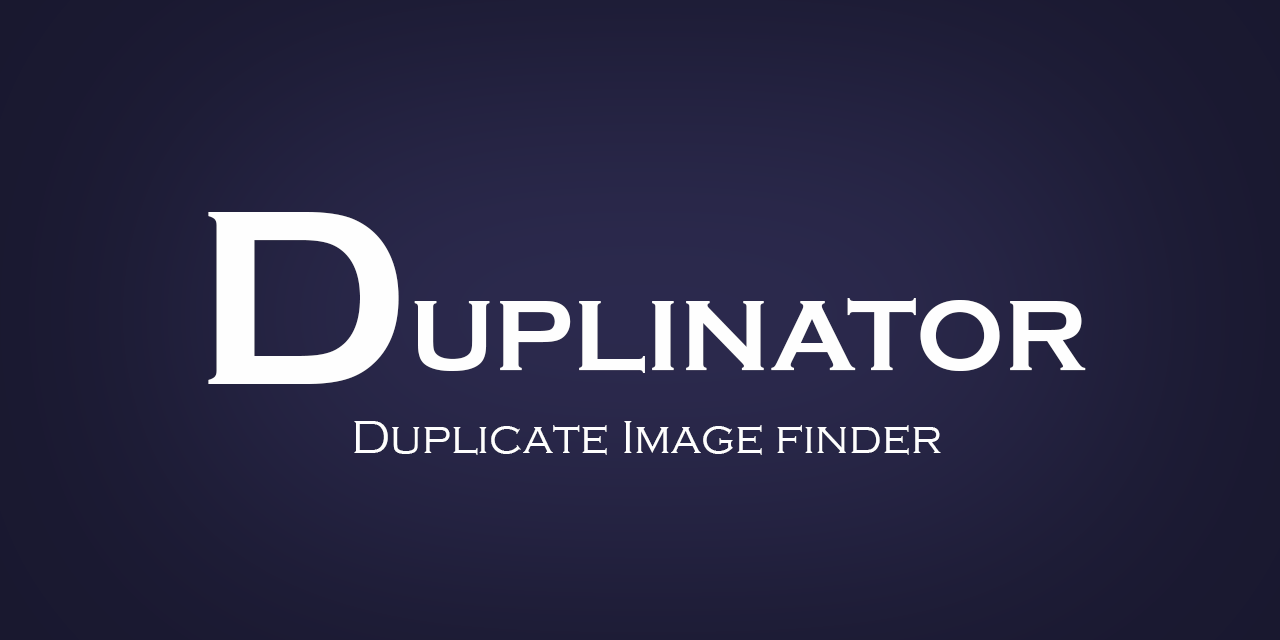
<style>
.page{position:relative;width:1280px;height:640px}
.page>*{position:absolute;margin:0}
.t1{font:258.4px "CopperplateGothic-Bold";color:#fefefe}
.t2{font:103.4px "CopperplateGothic-Bold";color:#fefefe}
.t3{font:48px "CopperplateGothic-Light";color:#fefefe}
</style>
<div class="page">
<p class="t1" style="left:208px;top:212px;width:191px;height:172px">D</p>
<p class="t2" style="left:414px;top:298px;width:672px;height:75px">UPLINATOR</p>
<p class="t3" style="left:354px;top:421px;width:587px;height:34px">Duplicate Image finder</p>
</div>
